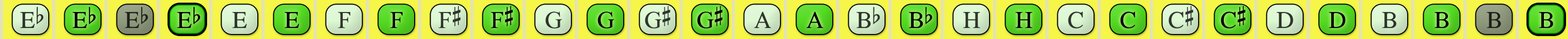
<style>
.page{position:relative;width:1568px;height:39px}
.page>*{position:absolute;margin:0}
.t1{font:24.1px "OpusChords";color:#30352d}
.t2{font:24.1px "OpusChords";color:#000000}
.t3{font:24.1px "OpusChords";color:#1f211b}
.t4{font:24.1px "OpusChords";color:#30362e}
.t5{font:24.1px "OpusChords";color:#2f352d}
.t6{font:24.1px "OpusChords";letter-spacing:-0.025em;color:#2f352d}
.t7{font:24.1px "OpusChords";letter-spacing:-0.025em;color:#000000}
</style>
<div class="page">
<p class="t1" style="left:20px;top:7px;width:24px;height:21px">Eb</p>
<p class="t2" style="left:72px;top:7px;width:24px;height:21px">Eb</p>
<p class="t3" style="left:125px;top:7px;width:23px;height:21px">Eb</p>
<p class="t2" style="left:177px;top:7px;width:24px;height:21px">Eb</p>
<p class="t4" style="left:232px;top:12px;width:15px;height:16px">E</p>
<p class="t2" style="left:284px;top:12px;width:15px;height:16px">E</p>
<p class="t4" style="left:338px;top:12px;width:12px;height:16px">F</p>
<p class="t2" style="left:390px;top:12px;width:13px;height:16px">F</p>
<p class="t1" style="left:438px;top:6px;width:23px;height:22px">F#</p>
<p class="t2" style="left:491px;top:6px;width:22px;height:22px">F#</p>
<p class="t5" style="left:545px;top:12px;width:17px;height:17px">G</p>
<p class="t2" style="left:598px;top:12px;width:16px;height:17px">G</p>
<p class="t6" style="left:645px;top:6px;width:25px;height:23px">G#</p>
<p class="t7" style="left:697px;top:6px;width:26px;height:23px">G#</p>
<p class="t5" style="left:754px;top:12px;width:17px;height:16px">A</p>
<p class="t2" style="left:806px;top:12px;width:17px;height:16px">A</p>
<p class="t1" style="left:856px;top:7px;width:24px;height:21px">Bb</p>
<p class="t2" style="left:909px;top:7px;width:23px;height:21px">Bb</p>
<p class="t1" style="left:963px;top:12px;width:17px;height:16px">H</p>
<p class="t2" style="left:1015px;top:12px;width:17px;height:16px">H</p>
<p class="t4" style="left:1068px;top:12px;width:15px;height:17px">C</p>
<p class="t2" style="left:1120px;top:12px;width:15px;height:17px">C</p>
<p class="t5" style="left:1168px;top:6px;width:25px;height:23px">C#</p>
<p class="t2" style="left:1221px;top:6px;width:24px;height:23px">C#</p>
<p class="t5" style="left:1277px;top:12px;width:16px;height:16px">D</p>
<p class="t2" style="left:1329px;top:12px;width:16px;height:16px">D</p>
<p class="t1" style="left:1382px;top:12px;width:15px;height:16px">B</p>
<p class="t2" style="left:1434px;top:12px;width:15px;height:16px">B</p>
<p class="t3" style="left:1487px;top:12px;width:14px;height:16px">B</p>
<p class="t2" style="left:1539px;top:12px;width:14px;height:16px">B</p>
</div>
